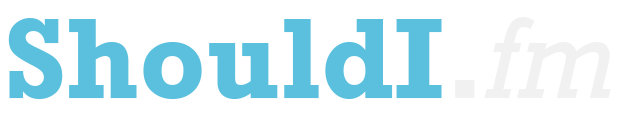
<style>
.page{position:relative;width:622px;height:113px;background:#ffffff}
.page>*{position:absolute;margin:0}
.t1{font:117px "Rockwell-Bold";color:#5bc0de}
.t2{font:117px "Rockwell-Bold";color:#f1f1f1}
.t3{font:117px "Rockwell-Italic";color:#f1f1f1}
</style>
<div class="page">
<p class="t1" style="left:8px;top:17px;width:603px;height:82px">ShouldI<span class="t2">.</span><span class="t3">fm</span></p>
</div>
